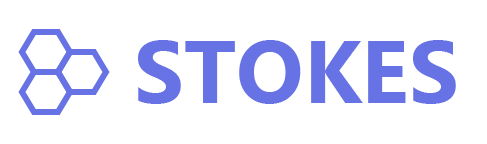
<style>
.page{position:relative;width:487px;height:144px;background:#ffffff}
.page>*{position:absolute;margin:0}
.t1{font:89px "MicrosoftTaiLe-Bold";color:#6772e5}
</style>
<div class="page">
<p class="t1" style="left:138px;top:40px;width:318px;height:64px">STOKES</p>
</div>
